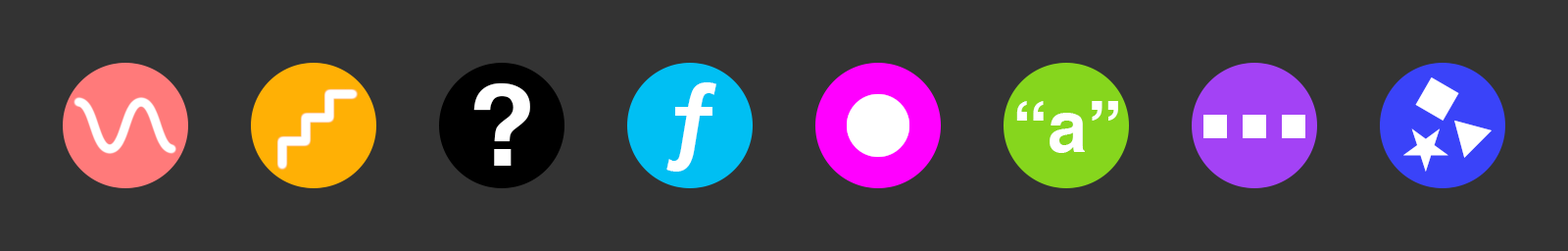
<style>
.page{position:relative;width:1568px;height:251px;background:#333333}
.page>*{position:absolute;margin:0}
.t1{font:112.7px "Helvetica-Bold";color:#ffffff}
.t2{font:94.1px "Helvetica-Bold";color:#ffffff}
.t3{font:70.6px "Helvetica-Bold";color:#ffffff}
</style>
<div class="page">
<p class="t1" style="left:473px;top:83px;width:57px;height:83px">?</p>
<p class="t2" style="left:666px;top:82px;width:50px;height:90px">ƒ</p>
<p class="t3" style="left:1016px;top:101px;width:102px;height:52px">“a”</p>
</div>
